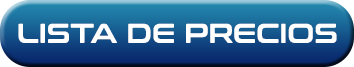
<style>
.page{position:relative;width:354px;height:67px}
.page>*{position:absolute;margin:0}
.t1{font:27.4px "ConthraxSb-Regular";color:#ffffff}
</style>
<div class="page">
<p class="t1" style="left:18px;top:23px;width:319px;height:20px">LISTA DE PRECIOS</p>
</div>
